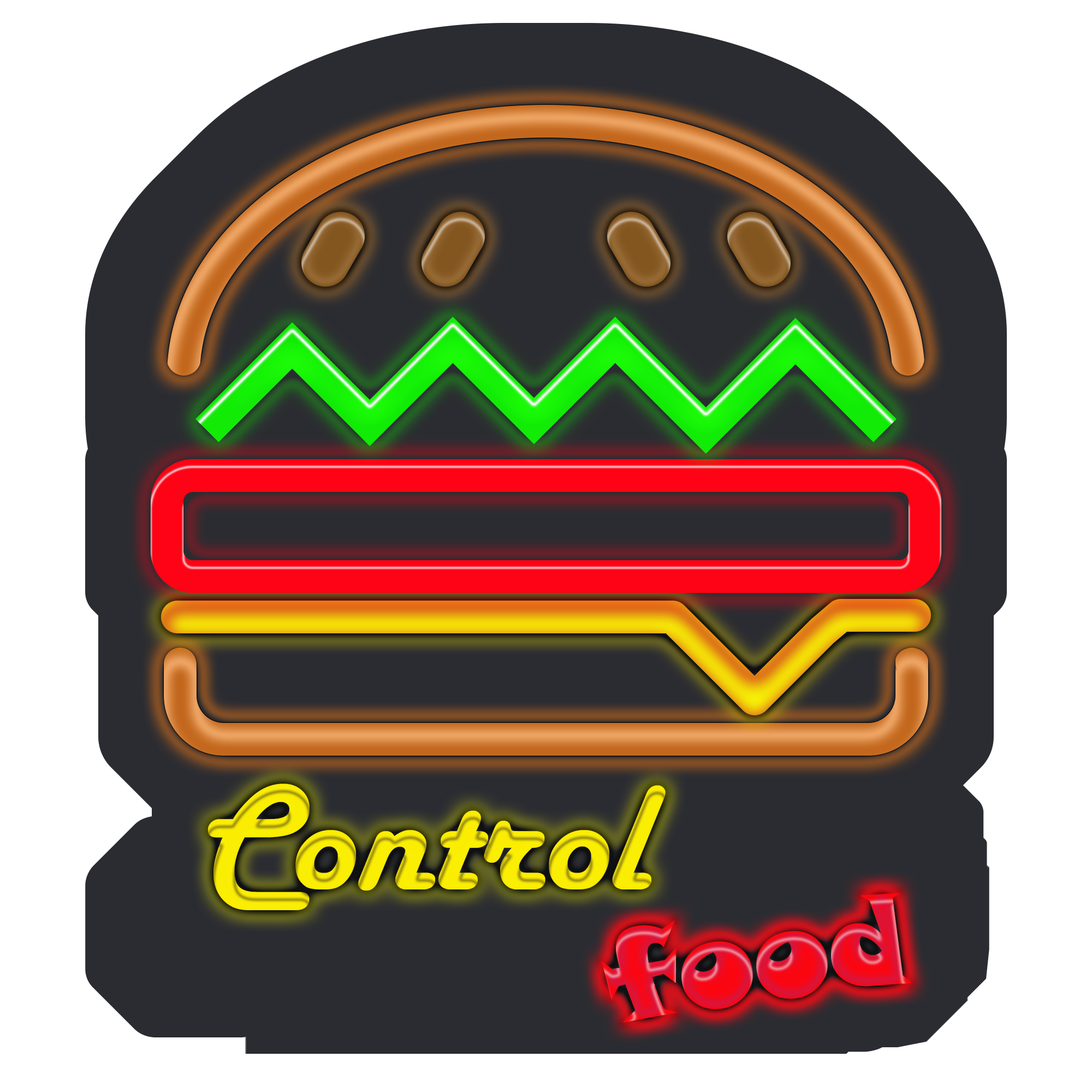
<style>
.page{position:relative;width:1092px;height:1092px;background:#2b2c31}
.page>*{position:absolute;margin:0}
.t1{font:156px "HarlowSolid";color:#faed04}
.t2{font:125.6px "SnapITC-Regular"}
</style>
<div class="page">
<p class="t1" style="left:208px;top:783px;width:458px;height:127px">Control</p>
<p class="t2" style="left:602px;top:893px;width:310px;height:130px;rotate:-8deg">food</p>
</div>
